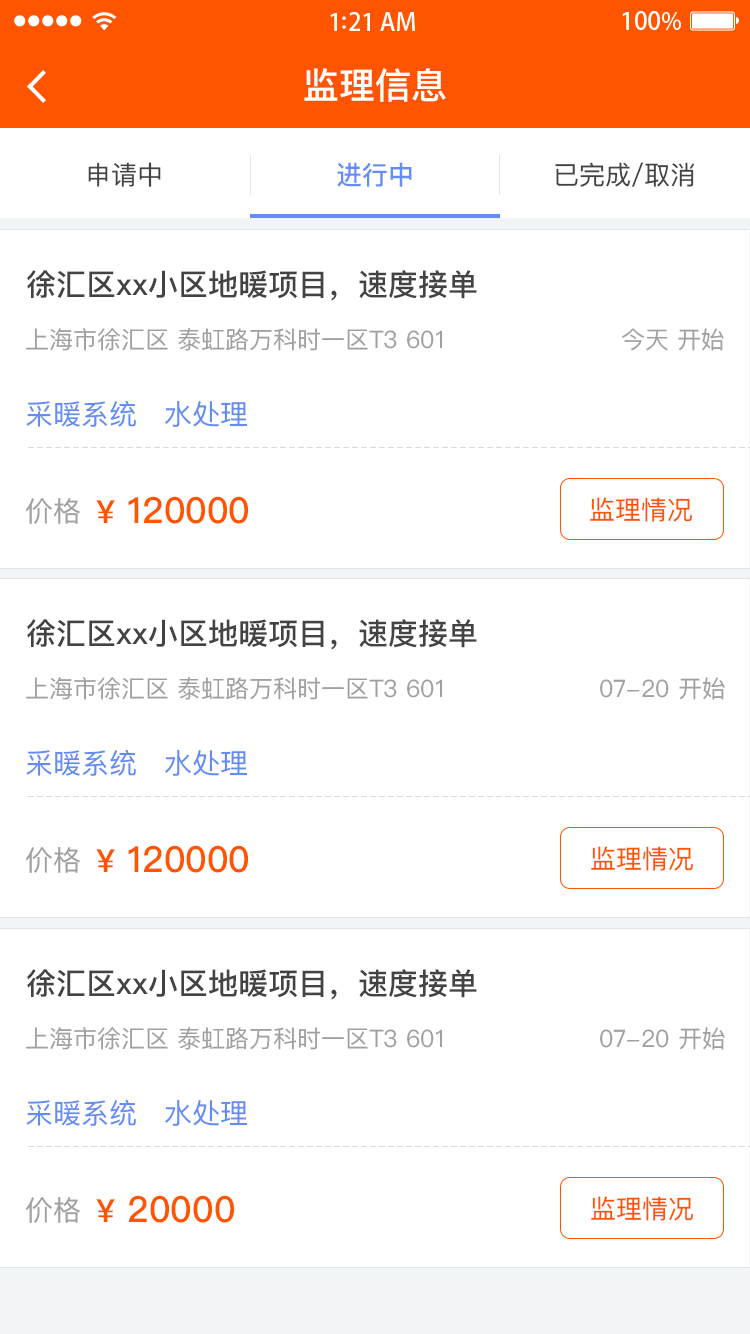
<style>
.page{position:relative;width:750px;height:1334px;background:#ffffff}
.page>*{position:absolute;margin:0}
.t1{font:36px "PingFangSC-Medium";color:#ffffff}
.t2{font:26px "PingFangSC-Regular";color:#434343}
.t3{font:26px "PingFangSC-Medium";color:#648df6}
.t4{font:30px "PingFangSC-Medium";color:#434343}
.t5{font:24px "PingFangSC-Regular";color:#a0a0a0}
.t6{font:28px "PingFangSC-Regular";color:#648df4}
.t7{font:36px "PingFangSC-Medium";color:#ff5400}
.t8{font:32px "PingFangSC-Medium";color:#ff5400}
.t9{font:26px "PingFangSC-Regular";color:#ff5400}
.t10{font:28px "PingFangSC-Regular";color:#a0a0a0}
</style>
<div class="page">
<p class="t1" style="left:304px;top:68px;width:142px;height:34px">监理信息</p>
<p class="t2" style="left:88px;top:162px;width:73px;height:25px">申请中</p>
<p class="t3" style="left:337px;top:162px;width:75px;height:25px">进行中</p>
<p class="t2" style="left:555px;top:162px;width:140px;height:25px">已完成/取消</p>
<p class="t4" style="left:27px;top:270px;width:450px;height:31px">徐汇区xx小区地暖项目，速度接单</p>
<p class="t5" style="left:26px;top:328px;width:416px;height:23px">上海市徐汇区 泰虹路万科时一区T3 601</p>
<p class="t5" style="left:622px;top:328px;width:102px;height:23px">今天 开始</p>
<p class="t6" style="left:26px;top:400px;width:110px;height:27px">采暖系统</p>
<p class="t6" style="left:165px;top:400px;width:82px;height:27px">水处理</p>
<p class="t7" style="left:96px;top:496px;width:152px;height:28px"><span class="t8">¥</span> 120000</p>
<p class="t9" style="left:590px;top:497px;width:102px;height:25px">监理情况</p>
<p class="t10" style="left:26px;top:498px;width:54px;height:26px">价格</p>
<p class="t4" style="left:27px;top:619px;width:450px;height:31px">徐汇区xx小区地暖项目，速度接单</p>
<p class="t5" style="left:26px;top:677px;width:416px;height:23px">上海市徐汇区 泰虹路万科时一区T3 601</p>
<p class="t5" style="left:600px;top:677px;width:125px;height:23px">07-20 开始</p>
<p class="t6" style="left:26px;top:749px;width:110px;height:27px">采暖系统</p>
<p class="t6" style="left:165px;top:749px;width:82px;height:27px">水处理</p>
<p class="t7" style="left:96px;top:845px;width:152px;height:28px"><span class="t8">¥</span> 120000</p>
<p class="t9" style="left:591px;top:846px;width:102px;height:25px">监理情况</p>
<p class="t10" style="left:26px;top:847px;width:54px;height:26px">价格</p>
<p class="t4" style="left:27px;top:969px;width:450px;height:31px">徐汇区xx小区地暖项目，速度接单</p>
<p class="t5" style="left:26px;top:1027px;width:416px;height:23px">上海市徐汇区 泰虹路万科时一区T3 601</p>
<p class="t5" style="left:600px;top:1027px;width:125px;height:23px">07-20 开始</p>
<p class="t6" style="left:26px;top:1099px;width:110px;height:27px">采暖系统</p>
<p class="t6" style="left:165px;top:1099px;width:82px;height:27px">水处理</p>
<p class="t10" style="left:26px;top:1197px;width:54px;height:26px">价格</p>
<p class="t7" style="left:96px;top:1195px;width:138px;height:28px"><span class="t8">¥</span> 20000</p>
<p class="t9" style="left:591px;top:1196px;width:102px;height:25px">监理情况</p>
</div>
